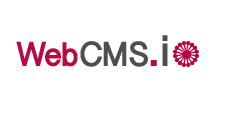
<style>
.page{position:relative;width:233px;height:113px;background:#ffffff}
.page>*{position:absolute;margin:0}
.t1{font:35px "MyanmarSangamMN-Bold";letter-spacing:-0.02em;color:#ba0843}
.t2{font:35px "MyanmarSangamMN-Bold";letter-spacing:-0.02em;color:#4e4e4e}
.t3{font:45.2px "MyanmarSangamMN-Bold";letter-spacing:0.06em;color:#ba0843}
.t4{font:45.2px "MyanmarSangamMN-Bold";letter-spacing:0.06em;color:#4e4e4e}
</style>
<div class="page">
<p class="t1" style="left:16px;top:41px;width:132px;height:26px">Web<span class="t2">CMS</span></p>
<p class="t3" style="left:150px;top:35px;width:18px;height:31px">.<span class="t4">i</span></p>
</div>
